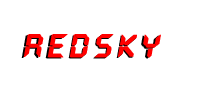
<style>
.page{position:relative;width:200px;height:100px;background:#ffffff}
.page>*{position:absolute;margin:0}
.t1{font:33px "QuartzMS";letter-spacing:0.075em;font-weight:bold;font-style:italic}
.t2{font:33px "QuartzMS";letter-spacing:0.075em;color:#ff0000;font-weight:bold;font-style:italic}
</style>
<div class="page">
<p class="t1" style="left:21px;top:35px;width:138px;height:24px">RedSky</p>
<p class="t2" style="left:23px;top:34px;width:138px;height:24px">RedSky</p>
</div>
